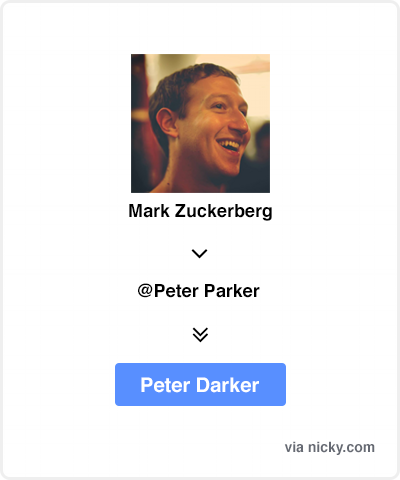
<style>
.page{position:relative;width:400px;height:480px;background:#ffffff}
.page>*{position:absolute;margin:0}
.t1{font:18px "Helvetica-Bold";color:#000000}
.t2{font:20px "Helvetica-Bold";color:#ffffff}
.t3{font:14px "Helvetica-Bold";color:#666a73}
</style>
<div class="page">
<p class="t1" style="left:129px;top:204px;width:143px;height:17px">Mark Zuckerberg</p>
<p class="t1" style="left:138px;top:283px;width:122px;height:15px">@Peter Parker</p>
<p class="t2" style="left:141px;top:377px;width:118px;height:16px">Peter Darker</p>
<p class="t3" style="left:284px;top:441px;width:91px;height:14px">via nicky.com</p>
</div>
